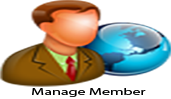
<style>
.page{position:relative;width:171px;height:99px;background:#ffffff}
.page>*{position:absolute;margin:0}
.t1{font:9.3px "MyriadPro-Regular";color:#000000;scale:1.73 1}
</style>
<div class="page">
<p class="t1" style="left:32px;top:88px;width:114px;height:9px">Manage Member</p>
</div>
